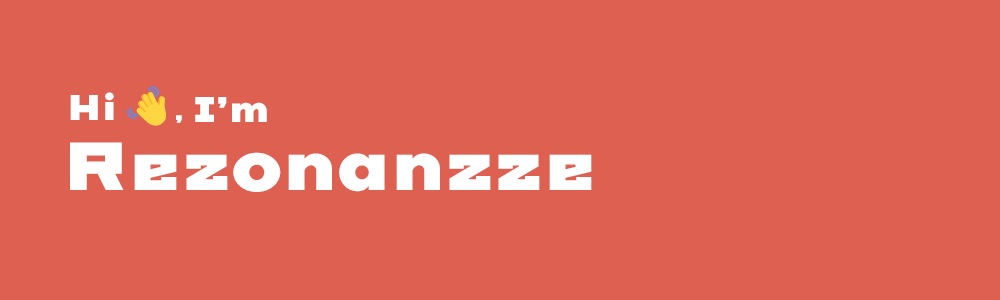
<style>
.page{position:relative;width:1000px;height:300px;background:#de6051}
.page>*{position:absolute;margin:0}
.t1{font:35.7px "ImperialOne";color:#ffffff}
.t2{font:25.3px "ImperialOne";color:#ffffff}
.t3{font:67.9px "ImperialOne";color:#ffffff}
</style>
<div class="page">
<p class="t1" style="left:70px;top:92px;width:44px;height:28px">Hi</p>
<p class="t1" style="left:195px;top:97px;width:72px;height:25px">I’m</p>
<p class="t2" style="left:176px;top:115px;width:6px;height:8px">,</p>
<p class="t3" style="left:70px;top:142px;width:522px;height:50px">Rezonanzze</p>
</div>
